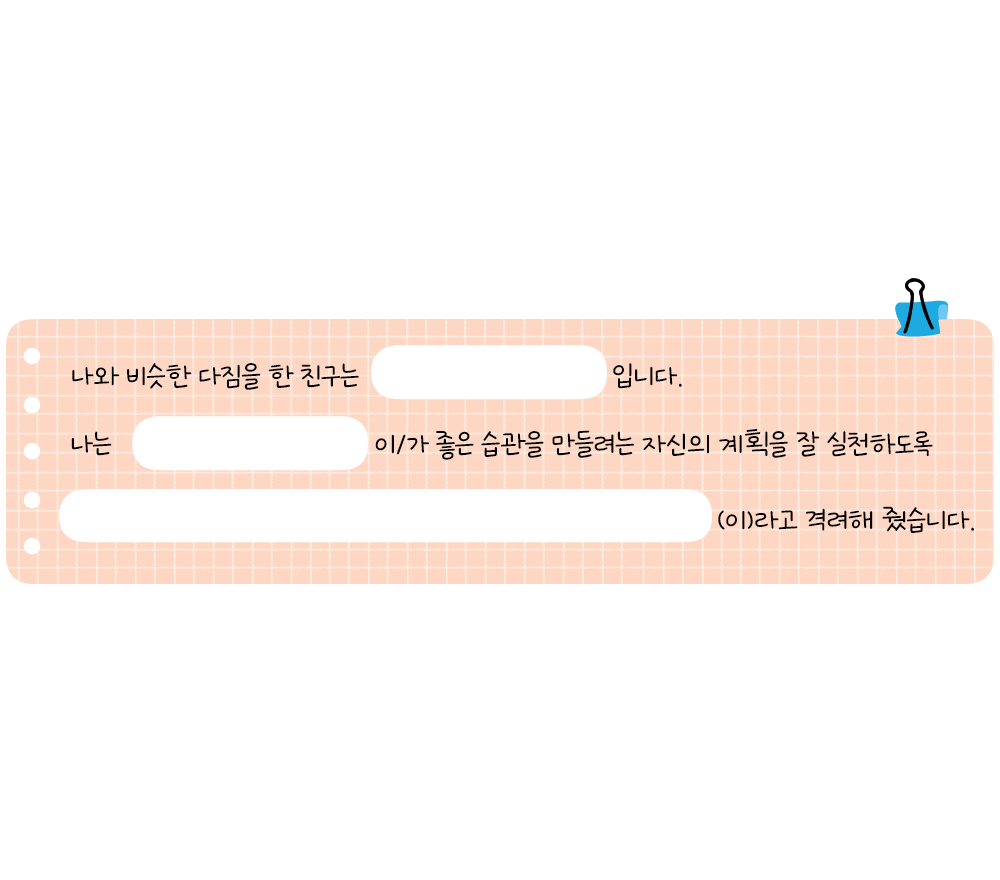
<style>
.page{position:relative;width:1000px;height:880px;background:#ffffff}
.page>*{position:absolute;margin:0}
.t1{font:37.5px "GangwonEduSaeeumMedium";letter-spacing:-0.02em;color:#000000}
</style>
<div class="page">
<p class="t1" style="left:72px;top:363px;width:287px;height:27px">나와 비슷한 다짐을 한 친구는</p>
<p class="t1" style="left:613px;top:363px;width:69px;height:26px">입니다.</p>
<p class="t1" style="left:71px;top:431px;width:41px;height:25px">나는</p>
<p class="t1" style="left:375px;top:429px;width:558px;height:31px">이/가 좋은 습관을 만들려는 자신의 계획을 잘 실천하도록</p>
<p class="t1" style="left:718px;top:506px;width:256px;height:27px">(이)라고 격려해 줬습니다.</p>
</div>
